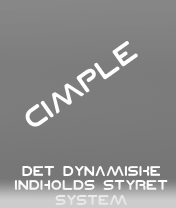
<style>
.page{position:relative;width:176px;height:208px}
.page>*{position:absolute;margin:0}
.t1{font:24px "PlanetNS";color:#ffffff}
.t2{font:12px "PlanetNS";color:#ffffff}
</style>
<div class="page">
<p class="t1" style="left:25px;top:41px;width:113px;height:86px;rotate:-35deg">Cimple</p>
<p class="t2" style="left:14px;top:166px;width:154px;height:39px;text-align:center">DEt Dynamiske Indholds styret system</p>
</div>
